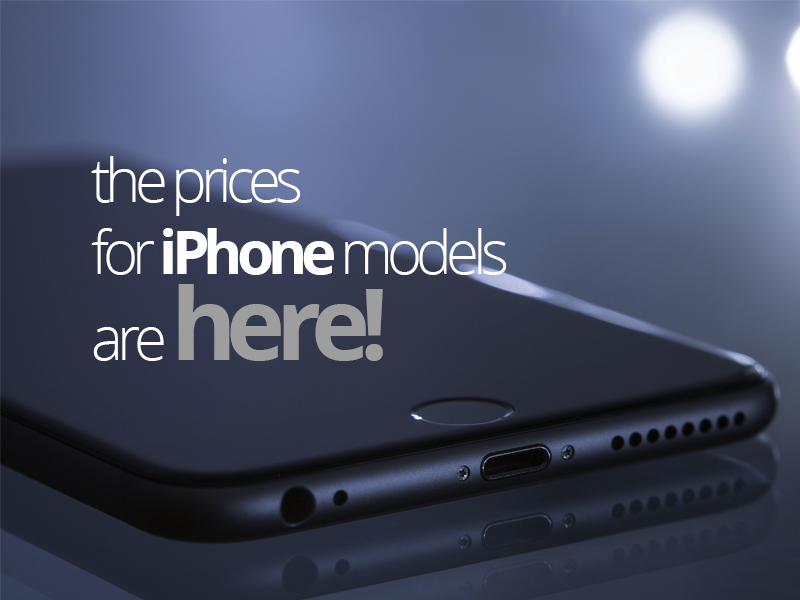
<style>
.page{position:relative;width:800px;height:600px}
.page>*{position:absolute;margin:0}
.t1{font:60px "OpenSans-Light";letter-spacing:-0.1em;color:#ffffff}
.t2{font:60px "OpenSans-Bold";letter-spacing:-0.1em;color:#ffffff}
.t3{font:60px/86px "OpenSans-Light";letter-spacing:-0.1em;color:#ffffff}
.t4{font:100px/86px "OpenSans-Bold";letter-spacing:-0.1em;color:#9e9e9e}
</style>
<div class="page">
<p class="t1" style="left:91px;top:156px;width:415px;height:205px">the prices<br>for <span class="t2">iPhone </span>models<br><span class="t3">are </span><span class="t4">here!</span></p>
</div>
